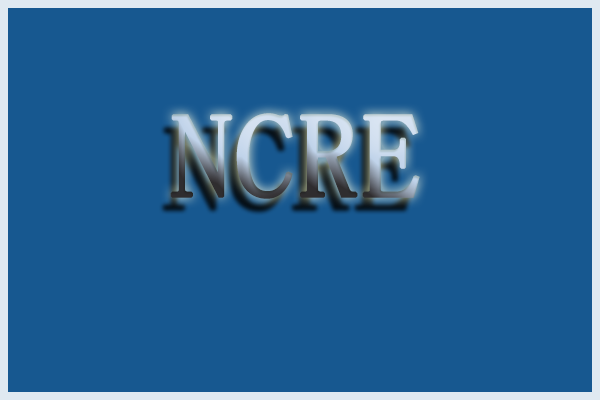
<style>
.page{position:relative;width:600px;height:400px;background:#175890}
.page>*{position:absolute;margin:0}
.t1{font:120px "NSimSun";font-weight:bold}
</style>
<div class="page">
<p class="t1" style="left:170px;top:113px;width:250px;height:86px">NCRE</p>
</div>
